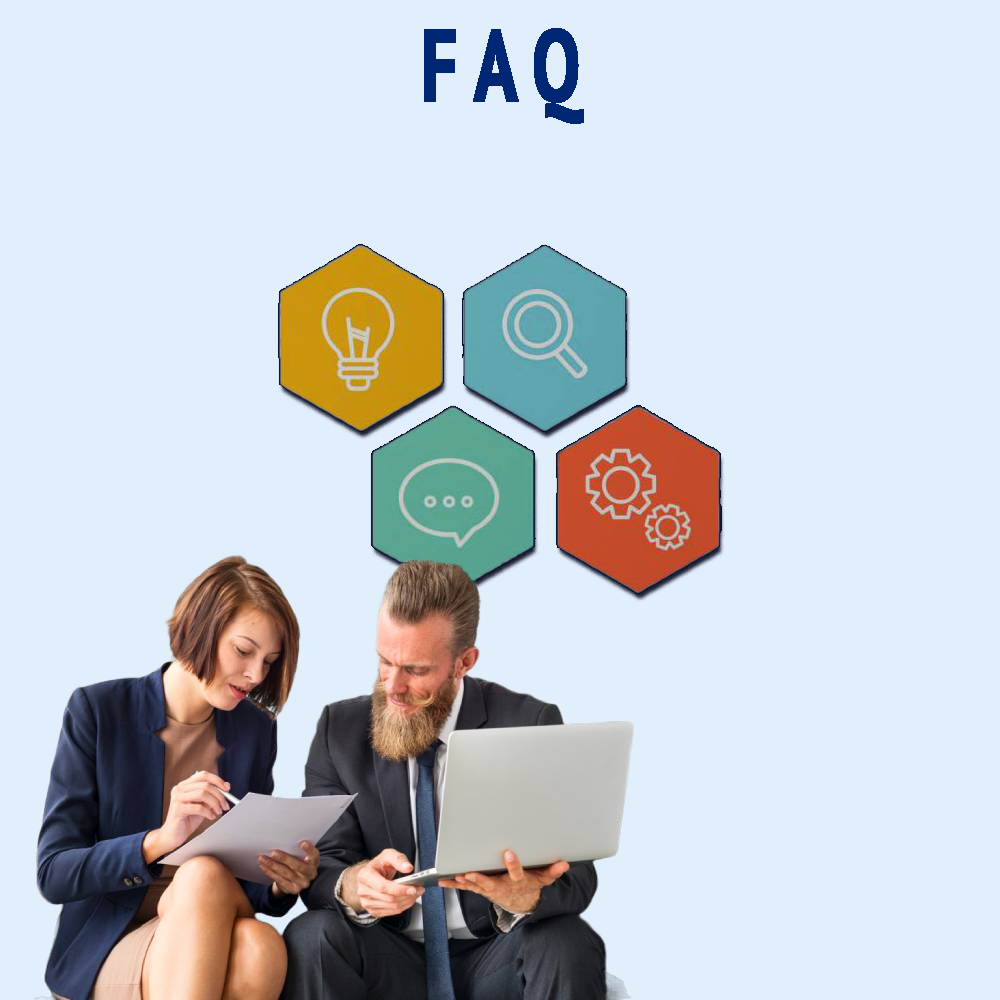
<style>
.page{position:relative;width:1000px;height:1000px;background:#e1eefb}
.page>*{position:absolute;margin:0}
.t1{font:100.8px "PTSans-Bold";letter-spacing:0.2em;color:#002774;font-weight:bold;scale:0.71 1}
</style>
<div class="page">
<p class="t1" style="left:424px;top:28px;width:160px;height:96px">FAQ</p>
</div>
